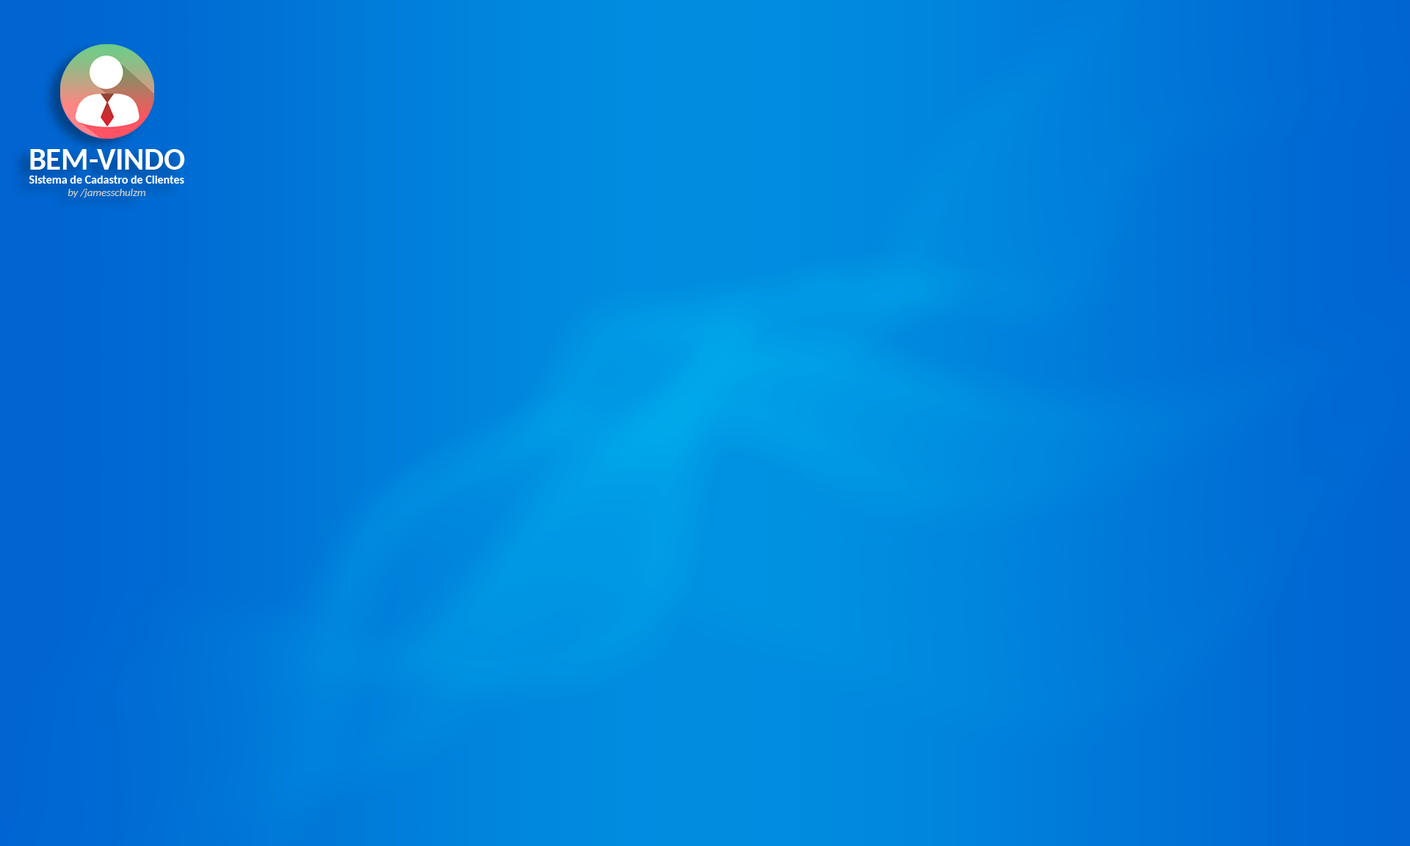
<style>
.page{position:relative;width:1410px;height:846px}
.page>*{position:absolute;margin:0}
.t1{font:11.7px "Carlito-Bold";color:#ffffff}
.t2{font:31.2px "Carlito-Bold";color:#ffffff}
.t3{font:10.8px "Carlito-Italic";color:#cccccc}
</style>
<div class="page">
<p class="t1" style="left:29px;top:149px;width:156px;height:49px;text-align:center"><span class="t2">BEM-VINDO<br></span>Sistema de Cadastro de Clientes<br><span class="t3">by /jamesschulzm</span></p>
</div>
